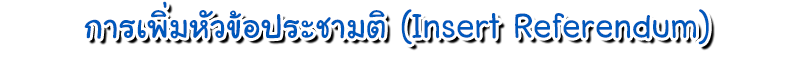
<style>
.page{position:relative;width:794px;height:57px;background:#ffffff}
.page>*{position:absolute;margin:0}
.t1{font:48px "LayijiMaHaNiYomV1.2";color:#0058bc}
</style>
<div class="page">
<p class="t1" style="left:84px;top:1px;width:625px;height:44px">การเพิ่มหัวข้อประชามติ (Insert Referendum)</p>
</div>
